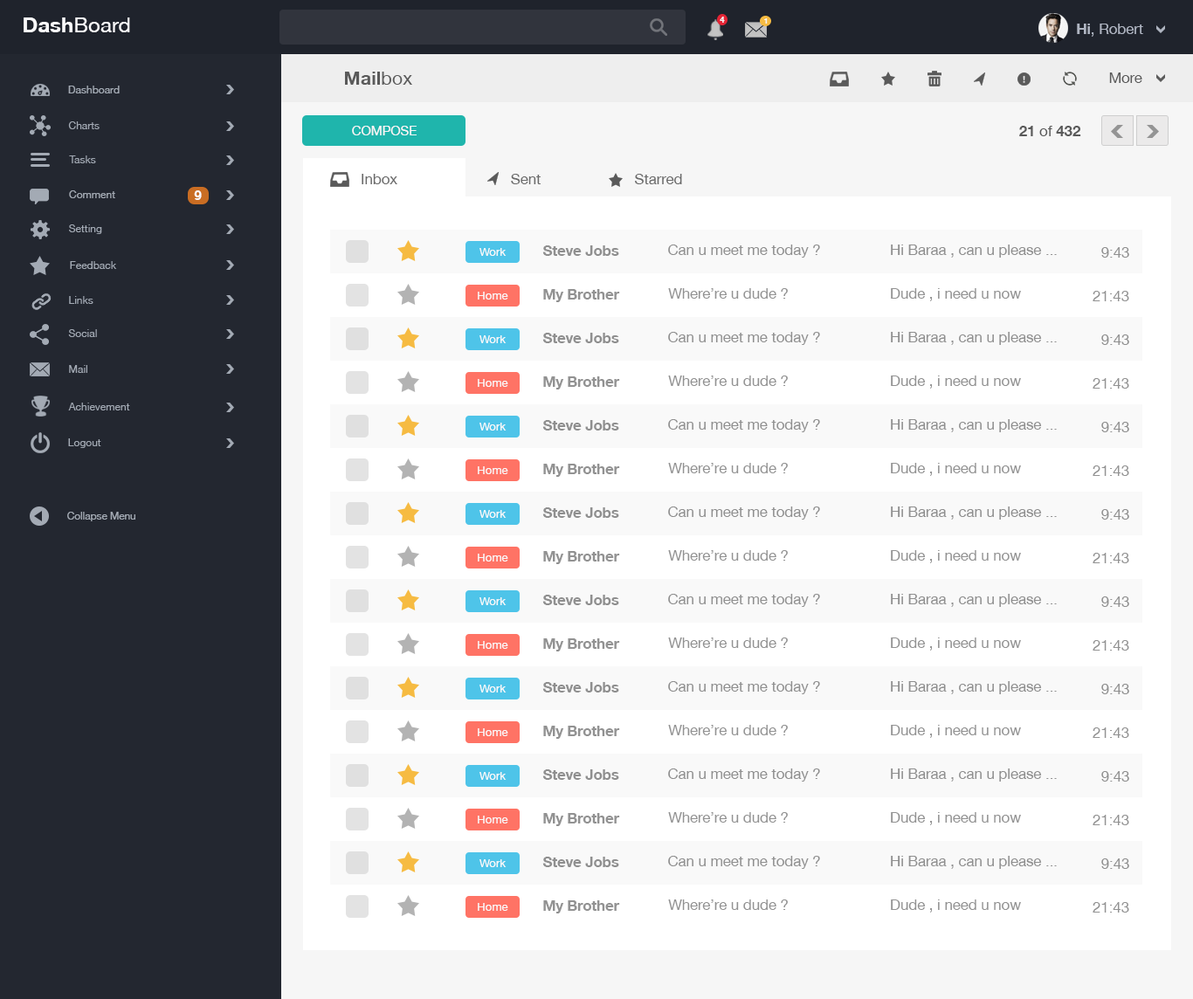
<style>
.page{position:relative;width:1193px;height:999px;background:#ffffff}
.page>*{position:absolute;margin:0}
.t1{font:21.1px "HelveticaNeueLTArabic-Roman";color:#fafafc}
.t2{font:21.1px "HelveticaNeueLTArabic-Bold";color:#fafafc}
.t3{font:8.5px "HelveticaNeueLTArabic-Bold";color:#f4f4f4;scale:0.93 1}
.t4{font:7.8px "HelveticaNeueLTArabic-Bold";color:#f4f4f4}
.t5{font:14.6px "HelveticaNeueLTArabic-Roman";color:#afb5c2}
.t6{font:14.6px "HelveticaNeueLTArabic-Bold";color:#afb5c2}
.t7{font:18.7px "HelveticaNeueLTArabic-Bold";color:#5a5a5a}
.t8{font:18.7px "HelveticaNeueLTArabic-Roman";color:#5a5a5a}
.t9{font:14.6px "HelveticaNeueLTArabic-Roman";color:#5a5a5a}
.t10{font:10.6px "HelveticaNeueLTArabic-Roman";color:#a3aab4}
.t11{font:13px "HelveticaNeueLTArabic-Roman";color:#f6f6f6}
.t12{font:14.6px "HelveticaNeueLTArabic-Bold";color:#5a5a5a}
.t13{font:14.6px "HelveticaNeueLTArabic-Roman";color:#6a6a6a}
.t14{font:13px "HelveticaNeueLTArabic-Bold";color:#fafafc}
.t15{font:14.6px "HelveticaNeueLTArabic-Bold";color:#8f8f8f}
.t16{font:14.6px "HelveticaNeueLTArabic-Roman";color:#8f8f8f}
.t17{font:11.4px "HelveticaNeueLTArabic-Roman";color:#f9f9f9}
.t18{font:14.6px "HelveticaNeueLTArabic-Bold";color:#929292}
.t19{font:14.6px "HelveticaNeueLTArabic-Roman";color:#929292}
.t20{font:10.3px "HelveticaNeueLTArabic-Roman";color:#a3aab4}
</style>
<div class="page">
<p class="t1" style="left:24px;top:17px;width:106px;height:15px"><span class="t2">Dash</span>Board</p>
<p class="t3" style="left:720px;top:17px;width:5px;height:6px">4</p>
<p class="t4" style="left:764px;top:18px;width:4px;height:6px">1</p>
<p class="t5" style="left:1077px;top:24px;width:66px;height:13px"><span class="t6">Hi</span>, Robert</p>
<p class="t7" style="left:345px;top:72px;width:67px;height:13px">Mail<span class="t8">box</span></p>
<p class="t9" style="left:1109px;top:73px;width:34px;height:10px">More</p>
<p class="t10" style="left:68px;top:86px;width:52px;height:7px">Dashboard</p>
<p class="t10" style="left:68px;top:121px;width:32px;height:8px">Charts</p>
<p class="t11" style="left:352px;top:126px;width:65px;height:9px">COMPOSE</p>
<p class="t12" style="left:1019px;top:126px;width:62px;height:10px">21 <span class="t9">of </span>432</p>
<p class="t10" style="left:69px;top:155px;width:27px;height:8px">Tasks</p>
<p class="t13" style="left:362px;top:174px;width:35px;height:10px">Inbox</p>
<p class="t13" style="left:511px;top:174px;width:30px;height:10px">Sent</p>
<p class="t13" style="left:635px;top:174px;width:47px;height:10px">Starred</p>
<p class="t10" style="left:69px;top:190px;width:46px;height:8px">Comment</p>
<p class="t14" style="left:194px;top:190px;width:8px;height:10px">9</p>
<p class="t10" style="left:69px;top:224px;width:33px;height:10px">Setting</p>
<p class="t15" style="left:542px;top:245px;width:77px;height:11px">Steve Jobs</p>
<p class="t16" style="left:668px;top:245px;width:152px;height:13px">Can u meet me today ?</p>
<p class="t16" style="left:891px;top:245px;width:166px;height:13px">Hi Baraa , can u please ...</p>
<p class="t17" style="left:480px;top:248px;width:27px;height:8px">Work</p>
<p class="t16" style="left:1102px;top:247px;width:27px;height:11px">9:43</p>
<p class="t10" style="left:70px;top:261px;width:47px;height:8px">Feedback</p>
<p class="t17" style="left:478px;top:292px;width:30px;height:8px">Home</p>
<p class="t18" style="left:543px;top:289px;width:77px;height:13px">My Brother</p>
<p class="t19" style="left:668px;top:288px;width:120px;height:11px">Where’re u dude ?</p>
<p class="t19" style="left:891px;top:288px;width:130px;height:13px">Dude , i need u now</p>
<p class="t19" style="left:1093px;top:291px;width:36px;height:10px">21:43</p>
<p class="t10" style="left:69px;top:296px;width:24px;height:8px">Links</p>
<p class="t10" style="left:68px;top:329px;width:29px;height:8px">Social</p>
<p class="t17" style="left:480px;top:335px;width:27px;height:8px">Work</p>
<p class="t15" style="left:542px;top:333px;width:77px;height:10px">Steve Jobs</p>
<p class="t16" style="left:668px;top:332px;width:152px;height:13px">Can u meet me today ?</p>
<p class="t16" style="left:891px;top:332px;width:166px;height:13px">Hi Baraa , can u please ...</p>
<p class="t16" style="left:1102px;top:335px;width:27px;height:10px">9:43</p>
<p class="t10" style="left:69px;top:365px;width:18px;height:8px">Mail</p>
<p class="t18" style="left:543px;top:376px;width:77px;height:14px">My Brother</p>
<p class="t19" style="left:668px;top:376px;width:120px;height:10px">Where’re u dude ?</p>
<p class="t19" style="left:891px;top:376px;width:130px;height:13px">Dude , i need u now</p>
<p class="t17" style="left:478px;top:379px;width:30px;height:8px">Home</p>
<p class="t19" style="left:1093px;top:378px;width:36px;height:11px">21:43</p>
<p class="t10" style="left:68px;top:403px;width:62px;height:8px">Achievement</p>
<p class="t17" style="left:480px;top:423px;width:27px;height:8px">Work</p>
<p class="t15" style="left:542px;top:420px;width:77px;height:11px">Steve Jobs</p>
<p class="t16" style="left:668px;top:419px;width:152px;height:13px">Can u meet me today ?</p>
<p class="t16" style="left:891px;top:419px;width:166px;height:13px">Hi Baraa , can u please ...</p>
<p class="t16" style="left:1102px;top:422px;width:27px;height:10px">9:43</p>
<p class="t10" style="left:68px;top:439px;width:33px;height:9px">Logout</p>
<p class="t17" style="left:478px;top:466px;width:30px;height:8px">Home</p>
<p class="t18" style="left:543px;top:464px;width:77px;height:13px">My Brother</p>
<p class="t19" style="left:668px;top:463px;width:120px;height:10px">Where’re u dude ?</p>
<p class="t19" style="left:891px;top:463px;width:130px;height:13px">Dude , i need u now</p>
<p class="t19" style="left:1093px;top:466px;width:36px;height:10px">21:43</p>
<p class="t15" style="left:542px;top:508px;width:77px;height:10px">Steve Jobs</p>
<p class="t16" style="left:668px;top:507px;width:152px;height:13px">Can u meet me today ?</p>
<p class="t16" style="left:891px;top:507px;width:166px;height:13px">Hi Baraa , can u please ...</p>
<p class="t16" style="left:1102px;top:509px;width:27px;height:11px">9:43</p>
<p class="t20" style="left:67px;top:512px;width:68px;height:9px">Collapse Menu</p>
<p class="t17" style="left:480px;top:510px;width:27px;height:8px">Work</p>
<p class="t17" style="left:478px;top:554px;width:30px;height:8px">Home</p>
<p class="t18" style="left:543px;top:551px;width:77px;height:13px">My Brother</p>
<p class="t19" style="left:668px;top:550px;width:120px;height:11px">Where’re u dude ?</p>
<p class="t19" style="left:891px;top:550px;width:130px;height:13px">Dude , i need u now</p>
<p class="t19" style="left:1093px;top:553px;width:36px;height:10px">21:43</p>
<p class="t17" style="left:480px;top:597px;width:27px;height:8px">Work</p>
<p class="t15" style="left:542px;top:595px;width:77px;height:10px">Steve Jobs</p>
<p class="t16" style="left:668px;top:594px;width:152px;height:13px">Can u meet me today ?</p>
<p class="t16" style="left:891px;top:594px;width:166px;height:13px">Hi Baraa , can u please ...</p>
<p class="t16" style="left:1102px;top:597px;width:27px;height:10px">9:43</p>
<p class="t17" style="left:478px;top:641px;width:30px;height:8px">Home</p>
<p class="t18" style="left:543px;top:639px;width:77px;height:13px">My Brother</p>
<p class="t19" style="left:668px;top:638px;width:120px;height:10px">Where’re u dude ?</p>
<p class="t19" style="left:891px;top:638px;width:130px;height:13px">Dude , i need u now</p>
<p class="t19" style="left:1093px;top:640px;width:36px;height:11px">21:43</p>
<p class="t17" style="left:480px;top:685px;width:27px;height:8px">Work</p>
<p class="t15" style="left:542px;top:682px;width:77px;height:11px">Steve Jobs</p>
<p class="t16" style="left:668px;top:681px;width:152px;height:13px">Can u meet me today ?</p>
<p class="t16" style="left:891px;top:681px;width:166px;height:13px">Hi Baraa , can u please ...</p>
<p class="t16" style="left:1102px;top:684px;width:27px;height:10px">9:43</p>
<p class="t18" style="left:543px;top:726px;width:77px;height:13px">My Brother</p>
<p class="t19" style="left:668px;top:725px;width:120px;height:11px">Where’re u dude ?</p>
<p class="t19" style="left:891px;top:725px;width:130px;height:13px">Dude , i need u now</p>
<p class="t17" style="left:478px;top:729px;width:30px;height:7px">Home</p>
<p class="t19" style="left:1093px;top:728px;width:36px;height:10px">21:43</p>
<p class="t17" style="left:480px;top:772px;width:27px;height:8px">Work</p>
<p class="t15" style="left:542px;top:770px;width:77px;height:10px">Steve Jobs</p>
<p class="t16" style="left:668px;top:769px;width:152px;height:13px">Can u meet me today ?</p>
<p class="t16" style="left:891px;top:769px;width:166px;height:13px">Hi Baraa , can u please ...</p>
<p class="t16" style="left:1102px;top:771px;width:27px;height:11px">9:43</p>
<p class="t17" style="left:478px;top:816px;width:30px;height:8px">Home</p>
<p class="t18" style="left:543px;top:813px;width:77px;height:13px">My Brother</p>
<p class="t19" style="left:668px;top:812px;width:120px;height:11px">Where’re u dude ?</p>
<p class="t19" style="left:891px;top:812px;width:130px;height:13px">Dude , i need u now</p>
<p class="t19" style="left:1093px;top:815px;width:36px;height:10px">21:43</p>
<p class="t15" style="left:542px;top:857px;width:77px;height:10px">Steve Jobs</p>
<p class="t16" style="left:668px;top:856px;width:152px;height:13px">Can u meet me today ?</p>
<p class="t16" style="left:891px;top:856px;width:166px;height:13px">Hi Baraa , can u please ...</p>
<p class="t17" style="left:480px;top:860px;width:27px;height:7px">Work</p>
<p class="t16" style="left:1102px;top:859px;width:27px;height:10px">9:43</p>
<p class="t17" style="left:478px;top:903px;width:30px;height:8px">Home</p>
<p class="t18" style="left:543px;top:901px;width:77px;height:13px">My Brother</p>
<p class="t19" style="left:668px;top:900px;width:120px;height:10px">Where’re u dude ?</p>
<p class="t19" style="left:891px;top:900px;width:130px;height:13px">Dude , i need u now</p>
<p class="t19" style="left:1093px;top:902px;width:36px;height:11px">21:43</p>
</div>
